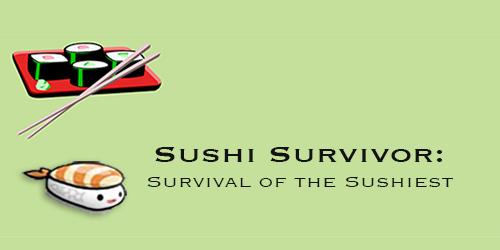
<style>
.page{position:relative;width:500px;height:250px;background:#c5e09b}
.page>*{position:absolute;margin:0}
.t1{font:30.1px "Copperplate";color:#131111;scale:1.2 1}
.t2{font:20.1px "Copperplate-Light";color:#131111;scale:1.2 1}
</style>
<div class="page">
<p class="t1" style="left:155px;top:147px;width:287px;height:15px">Sushi Survivor:</p>
<p class="t2" style="left:147px;top:176px;width:306px;height:11px">Survival of the Sushiest</p>
</div>
